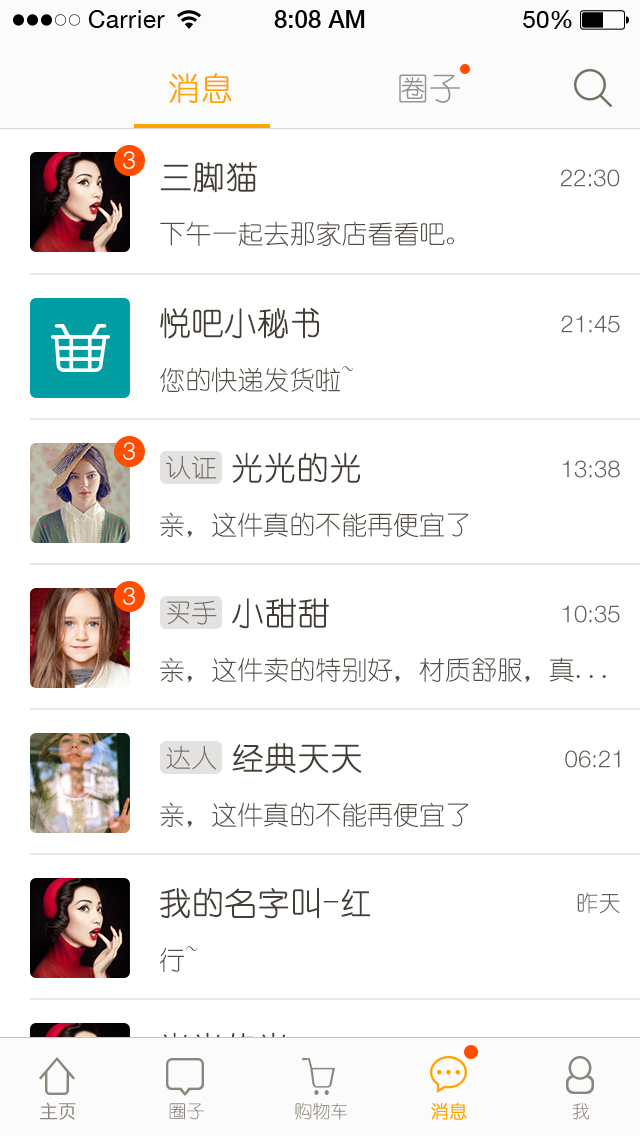
<style>
.page{position:relative;width:640px;height:1136px;background:#ffffff}
.page>*{position:absolute;margin:0}
.t1{font:32px "YouYuan";color:#ffa300;text-transform:uppercase;font-weight:bold}
.t2{font:32px "YouYuan";color:#939292;text-transform:uppercase}
.t3{font:24px "Helvetica-Light";color:#ffffff;text-transform:uppercase}
.t4{font:32px "YouYuan";color:#433e34;text-transform:uppercase;font-weight:bold}
.t5{font:24px "HelveticaNeueLTPro-Lt";color:#625e58;text-transform:uppercase}
.t6{font:26px "YouYuan";color:#524d44;text-transform:uppercase}
.t7{font:26px "YouYuan";color:#6f6b65;text-transform:uppercase}
.t8{font:22px "YouYuan";color:#625e58;text-transform:uppercase}
.t9{font:18px "YouYuan";color:#8b867d;font-weight:bold}
.t10{font:18px "YouYuan";color:#8b867d;text-transform:uppercase}
.t11{font:18px "YouYuan";color:#ffa300;text-transform:uppercase;font-weight:bold}
</style>
<div class="page">
<p class="t1" style="left:169px;top:73px;width:63px;height:31px">消息</p>
<p class="t2" style="left:399px;top:74px;width:61px;height:29px">圈子</p>
<p class="t3" style="left:123px;top:151px;width:12px;height:18px">3</p>
<p class="t4" style="left:160px;top:162px;width:97px;height:31px">三脚猫</p>
<p class="t5" style="left:560px;top:169px;width:60px;height:18px">22:30</p>
<p class="t6" style="left:160px;top:221px;width:294px;height:25px">下午一起去那家店看看吧。</p>
<p class="t4" style="left:160px;top:308px;width:159px;height:31px">悦吧小秘书</p>
<p class="t5" style="left:561px;top:315px;width:59px;height:18px">21:45</p>
<p class="t6" style="left:160px;top:366px;width:194px;height:27px">您的快递发货啦~</p>
<p class="t3" style="left:123px;top:442px;width:12px;height:18px">3</p>
<p class="t7" style="left:166px;top:455px;width:51px;height:24px">认证</p>
<p class="t4" style="left:232px;top:452px;width:128px;height:31px">光光的光</p>
<p class="t5" style="left:562px;top:460px;width:58px;height:18px">13:38</p>
<p class="t6" style="left:160px;top:512px;width:309px;height:26px">亲，这件真的不能再便宜了</p>
<p class="t3" style="left:123px;top:587px;width:12px;height:18px">3</p>
<p class="t7" style="left:167px;top:600px;width:50px;height:25px">买手</p>
<p class="t4" style="left:232px;top:598px;width:97px;height:31px">小甜甜</p>
<p class="t5" style="left:562px;top:605px;width:58px;height:18px">10:35</p>
<p class="t6" style="left:160px;top:657px;width:446px;height:26px">亲，这件卖的特别好，材质舒服，真...</p>
<p class="t7" style="left:166px;top:745px;width:51px;height:25px">达人</p>
<p class="t4" style="left:232px;top:743px;width:130px;height:31px">经典天天</p>
<p class="t5" style="left:565px;top:750px;width:55px;height:18px">06:21</p>
<p class="t6" style="left:160px;top:802px;width:309px;height:26px">亲，这件真的不能再便宜了</p>
<p class="t4" style="left:160px;top:887px;width:211px;height:32px">我的名字叫-红</p>
<p class="t8" style="left:577px;top:892px;width:43px;height:22px">昨天</p>
<p class="t6" style="left:160px;top:946px;width:38px;height:26px">行~</p>
<p class="t9" style="left:40px;top:1102px;width:36px;height:18px">主页</p>
<p class="t10" style="left:169px;top:1103px;width:35px;height:17px">圈子</p>
<p class="t10" style="left:295px;top:1102px;width:52px;height:18px">购物车</p>
<p class="t11" style="left:431px;top:1102px;width:36px;height:18px">消息</p>
<p class="t10" style="left:572px;top:1102px;width:17px;height:18px">我</p>
</div>
